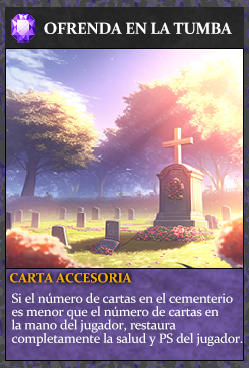
<style>
.page{position:relative;width:249px;height:368px}
.page>*{position:absolute;margin:0}
.t1{font:16px "Constantia-Bold";letter-spacing:-0.02em;color:#ffffff}
.t2{font:13.3px "Constantia-Bold";letter-spacing:-0.02em;color:#f2ac05}
.t3{font:13.3px/13.3px "Constantia";letter-spacing:-0.02em;color:#ffffff}
</style>
<div class="page">
<p class="t1" style="left:44px;top:22px;width:188px;height:12px">OFRENDA EN LA TUMBA</p>
<p class="t2" style="left:10px;top:273px;width:122px;height:10px">CARTA ACCESORIA</p>
<p class="t3" style="left:11px;top:293px;width:232px;height:53px">Si el número de cartas en el cementerio<br>es menor que el número de cartas en<br>la mano del jugador, restaura <br>completamente la salud y PS del jugador.</p>
</div>
